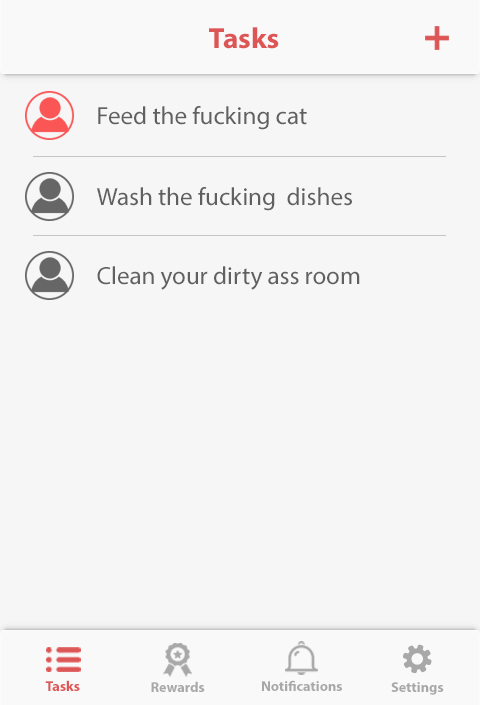
<style>
.page{position:relative;width:480px;height:705px;background:#f6f6f6}
.page>*{position:absolute;margin:0}
.t1{font:29.2px "MyriadPro-Bold";color:#dd5555}
.t2{font:25px "MyriadPro-Regular";color:#606060}
.t3{font:14.2px "MyriadPro-Bold";color:#dd5555}
.t4{font:14.2px "MyriadPro-Bold";color:#a8a8a8}
</style>
<div class="page">
<p class="t1" style="left:209px;top:27px;width:70px;height:22px">Tasks</p>
<p class="t2" style="left:98px;top:106px;width:209px;height:24px">Feed the fucking cat</p>
<p class="t2" style="left:97px;top:187px;width:255px;height:24px">Wash the fucking  dishes</p>
<p class="t2" style="left:97px;top:266px;width:263px;height:24px">Clean your dirty ass room</p>
<p class="t3" style="left:45px;top:680px;width:35px;height:11px">Tasks</p>
<p class="t4" style="left:151px;top:681px;width:54px;height:11px">Rewards</p>
<p class="t4" style="left:262px;top:680px;width:80px;height:11px">Notifications</p>
<p class="t4" style="left:391px;top:682px;width:53px;height:13px">Settings</p>
</div>
